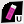
<style>
.page{position:relative;width:24px;height:24px;background:#000000}
.page>*{position:absolute;margin:0}
.t1{font:7.9px "Montserrat-Bold";color:#000000}
</style>
<div class="page">
<p class="t1" style="left:16px;top:16px;width:6px;height:6px">U</p>
</div>
